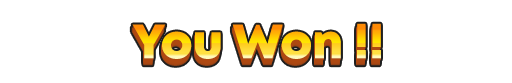
<style>
.page{position:relative;width:512px;height:83px;background:#ffffff}
.page>*{position:absolute;margin:0}
.t1{font:48.1px "Mont-HeavyDEMO"}
</style>
<div class="page">
<p class="t1" style="left:132px;top:23px;width:249px;height:36px">You Won !!</p>
</div>
